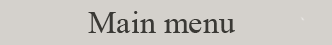
<style>
.page{position:relative;width:332px;height:45px;background:#d4d1cc}
.page>*{position:absolute;margin:0}
.t1{font:32px "TimesNewRomanPSMT";color:#3a3935}
</style>
<div class="page">
<p class="t1" style="left:88px;top:11px;width:147px;height:22px">Main menu</p>
</div>
